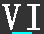
<style>
.page{position:relative;width:44px;height:34px;background:#333333}
.page>*{position:absolute;margin:0}
.t1{font:37.5px "SimSun-ExtB";letter-spacing:0.05em;color:#ffffff;font-weight:bold}
</style>
<div class="page">
<p class="t1" style="left:2px;top:4px;width:38px;height:26px">VI</p>
</div>
